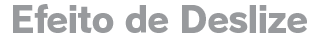
<style>
.page{position:relative;width:320px;height:40px;background:#ffffff}
.page>*{position:absolute;margin:0}
.t1{font:36px "RodinPro-EB";letter-spacing:-0.04em;color:#989a9d}
</style>
<div class="page">
<p class="t1" style="left:13px;top:4px;width:294px;height:29px">Efeito de Deslize</p>
</div>
